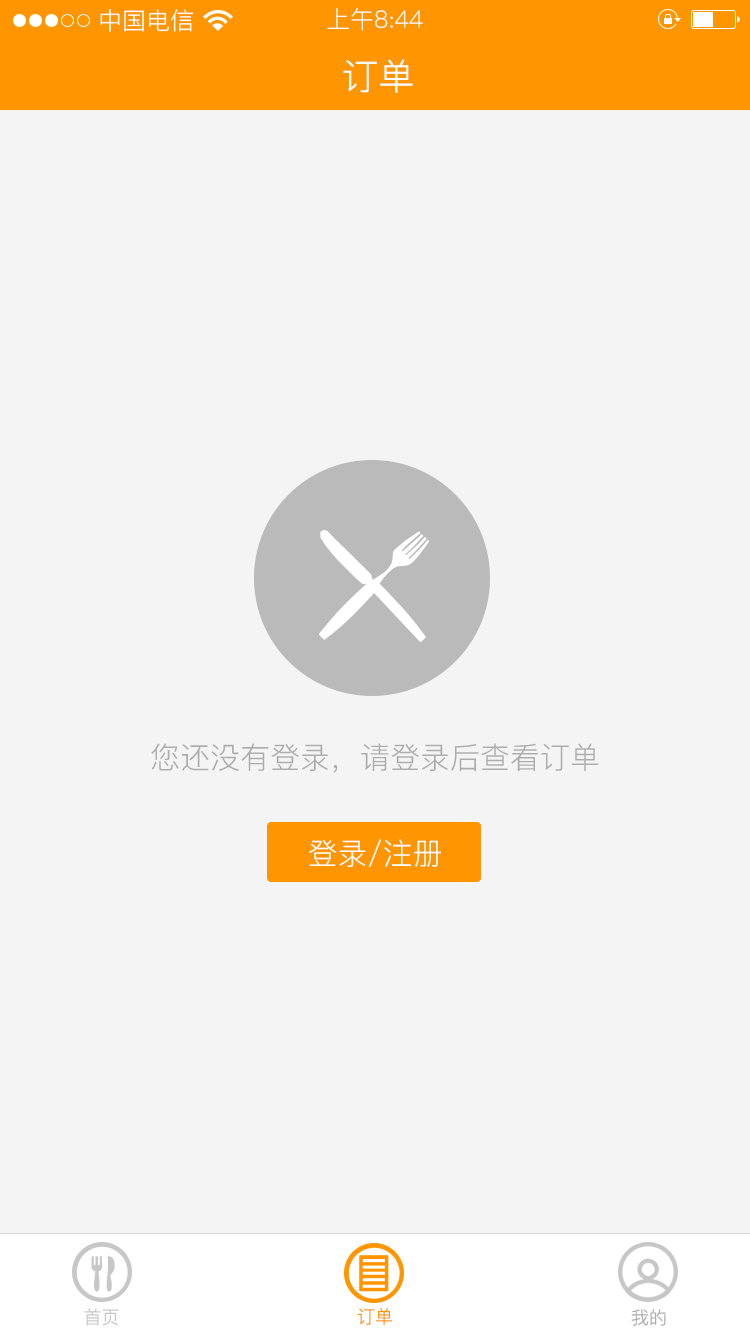
<style>
.page{position:relative;width:750px;height:1334px;background:#f4f4f4}
.page>*{position:absolute;margin:0}
.t1{font:24px "PingFang-SC-Regular";color:#ffffff}
.t2{font:36px "PingFang-SC-Regular";letter-spacing:0.01em;color:#ffffff}
.t3{font:30px "PingFang-SC-Regular";color:#acacac}
.t4{font:30px "PingFang-SC-Regular";color:#ffffff}
.t5{font:18px "PingFang-SC-Regular";color:#c8c7c7}
.t6{font:18px "PingFang-SC-Regular";color:#ff9500}
.t7{font:18px "PingFang-SC-Regular";color:#acacac}
</style>
<div class="page">
<p class="t1" style="left:100px;top:9px;width:94px;height:23px">中国电信</p>
<p class="t1" style="left:327px;top:8px;width:96px;height:23px">上午8:44</p>
<p class="t2" style="left:343px;top:59px;width:70px;height:34px">订单</p>
<p class="t3" style="left:151px;top:743px;width:448px;height:30px">您还没有登录，请登录后查看订单</p>
<p class="t4" style="left:309px;top:839px;width:132px;height:28px">登录/注册</p>
<p class="t5" style="left:84px;top:1308px;width:35px;height:18px">首页</p>
<p class="t6" style="left:357px;top:1308px;width:35px;height:17px">订单</p>
<p class="t7" style="left:631px;top:1309px;width:35px;height:17px">我的</p>
</div>
